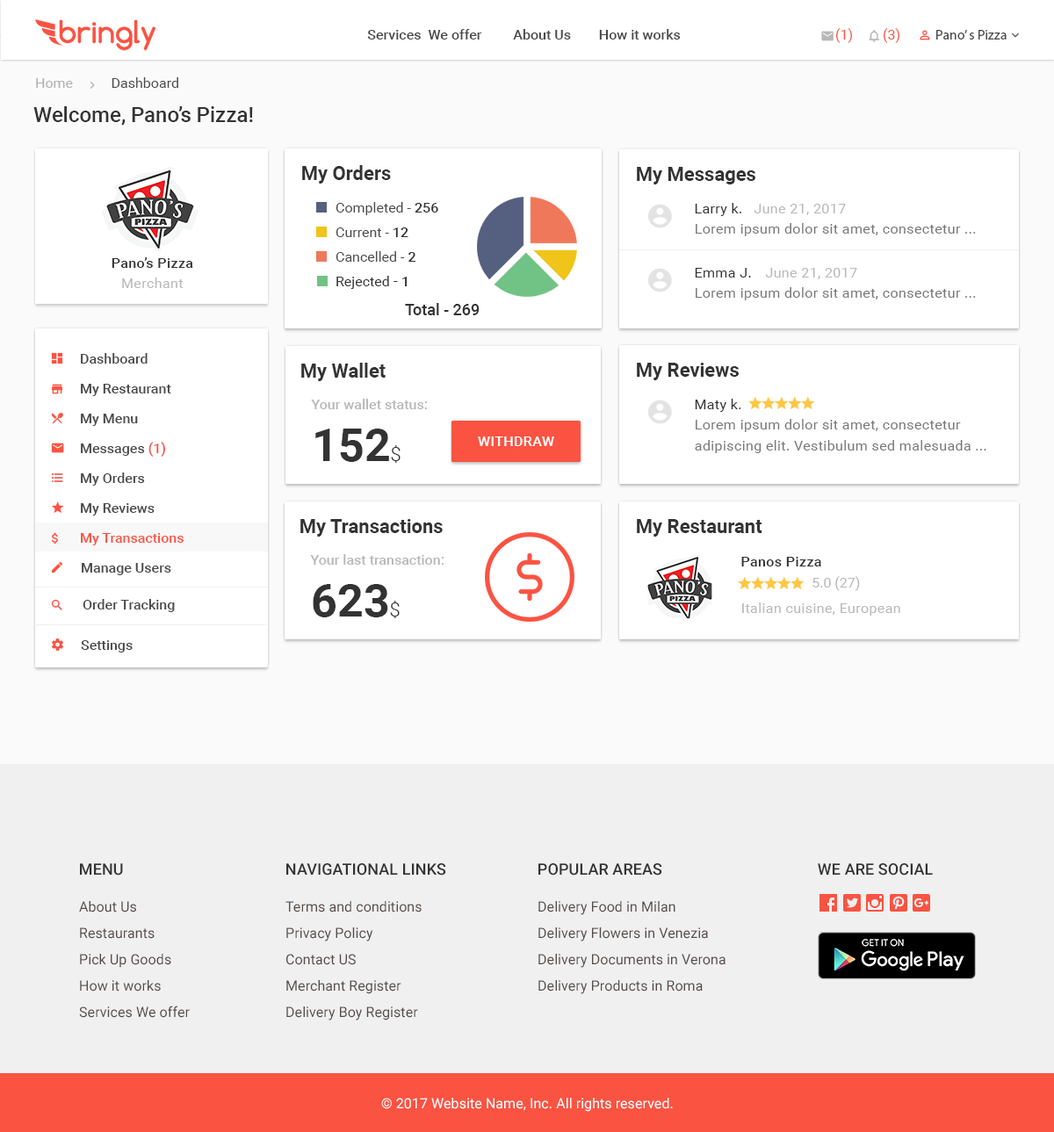
<style>
.page{position:relative;width:1054px;height:1132px;background:#ffffff}
.page>*{position:absolute;margin:0}
.t1{font:14px "Roboto-Medium";color:#4a4a4a}
.t2{font:14px "Roboto-Regular";color:#fa5342}
.t3{font:14px "MyriadPro-Regular";color:#4a4a4a}
.t4{font:14px "Roboto-Regular";color:#4a4a4a}
.t5{font:14px "Roboto-Regular";color:#b0b0b0}
.t6{font:21.1px "Roboto-Medium";color:#333333}
.t7{font:19.3px "Roboto-Bold";color:#333333}
.t8{font:14px/24.6px "Roboto-Regular";color:#4a4a4a}
.t9{font:14px/24.6px "Roboto-Medium";color:#333333}
.t10{font:14px/24.6px "Roboto-Regular";color:#333333}
.t11{font:14px "Roboto-Regular";letter-spacing:0.025em;color:#333333}
.t12{font:14px "Roboto-Regular";letter-spacing:0.025em;color:#b8b8b8}
.t13{font:14px "Roboto-Regular";letter-spacing:0.025em;color:#777777}
.t14{font:14px "Roboto-Medium";letter-spacing:0.025em;color:#333333}
.t15{font:15.8px "Roboto-Medium";color:#333333}
.t16{font:14px/29.9px "Roboto-Medium";color:#4a4a4a}
.t17{font:14px/29.9px "Roboto-Medium";color:#fa5342}
.t18{font:14px "Roboto-Medium";color:#b8b8b8}
.t19{font:14px/21.1px "Roboto-Regular";letter-spacing:0.025em;color:#777777}
.t20{font:45.7px "Roboto-Bold";color:#333333}
.t21{font:19.3px "Roboto-Light";color:#333333}
.t22{font:14px "Roboto-Medium";letter-spacing:0.025em;color:#fefefe;text-transform:uppercase}
.t23{font:14px "Roboto-Regular";color:#b8b8b8}
.t24{font:15.8px "Roboto-Medium";letter-spacing:0.005em;color:#333333}
.t25{font:15.8px "Roboto-Medium";letter-spacing:0.005em;color:#333333;text-transform:uppercase}
.t26{font:14px/26.3px "Roboto-Regular";letter-spacing:0.005em;color:#554c4a}
.t27{font:14px "Roboto-Regular";letter-spacing:0.005em;color:#ffffff}
</style>
<div class="page">
<p class="t1" style="left:367px;top:29px;width:313px;height:11px">Services  We offer         About Us        How it works</p>
<p class="t2" style="left:835px;top:28px;width:17px;height:15px">(1)</p>
<p class="t2" style="left:882px;top:28px;width:17px;height:15px">(3)</p>
<p class="t3" style="left:936px;top:30px;width:70px;height:10px">Pano’ s Pizza</p>
<p class="t4" style="left:36px;top:77px;width:142px;height:11px"><span class="t5">Home           </span>Dashboard</p>
<p class="t6" style="left:33px;top:106px;width:220px;height:20px">Welcome, Pano’s Pizza!</p>
<p class="t7" style="left:302px;top:165px;width:89px;height:19px">My Orders</p>
<p class="t7" style="left:637px;top:167px;width:118px;height:17px">My Messages</p>
<p class="t8" style="left:335px;top:202px;width:103px;height:87px">Completed - <span class="t9">256<br></span>Current - <span class="t9">12<br></span>Cancelled - <span class="t9">2<br></span><span class="t10">Rejected</span><span class="t9"> - 1</span></p>
<p class="t11" style="left:695px;top:203px;width:46px;height:13px">Larry k.</p>
<p class="t12" style="left:753px;top:204px;width:93px;height:11px">June 21, 2017</p>
<p class="t13" style="left:695px;top:223px;width:280px;height:13px">Lorem ipsum dolor sit amet, consectetur ...</p>
<p class="t14" style="left:112px;top:257px;width:81px;height:11px">Pano’s Pizza</p>
<p class="t11" style="left:695px;top:268px;width:56px;height:9px">Emma J.</p>
<p class="t12" style="left:765px;top:268px;width:92px;height:11px">June 21, 2017</p>
<p class="t12" style="left:122px;top:277px;width:61px;height:11px">Merchant</p>
<p class="t13" style="left:695px;top:287px;width:280px;height:13px">Lorem ipsum dolor sit amet, consectetur ...</p>
<p class="t15" style="left:405px;top:303px;width:74px;height:12px">Total - 269</p>
<p class="t16" style="left:81px;top:353px;width:103px;height:192px">Dashboard<br>My Restaurant<br>My Menu<br>Messages <span class="t17">(1)<br></span>My Orders<br>My Reviews<br><span class="t17">My Transactions</span></p>
<p class="t7" style="left:301px;top:363px;width:84px;height:18px">My Wallet</p>
<p class="t7" style="left:637px;top:363px;width:101px;height:17px">My Reviews</p>
<p class="t18" style="left:311px;top:399px;width:116px;height:10px">Your wallet status:</p>
<p class="t11" style="left:695px;top:399px;width:46px;height:13px">Maty k.</p>
<p class="t19" style="left:695px;top:419px;width:291px;height:34px">Lorem ipsum dolor sit amet, consectetur adipiscing elit. Vestibulum sed malesuada ...</p>
<p class="t20" style="left:315px;top:428px;width:85px;height:35px">152<span class="t21">$</span></p>
<p class="t22" style="left:478px;top:436px;width:76px;height:10px">Withdraw</p>
<p class="t7" style="left:300px;top:519px;width:143px;height:17px">My Transactions</p>
<p class="t7" style="left:637px;top:519px;width:125px;height:17px">My Restaurant</p>
<p class="t18" style="left:310px;top:554px;width:133px;height:11px">Your last transaction:</p>
<p class="t14" style="left:741px;top:557px;width:80px;height:9px">Panos Pizza</p>
<p class="t1" style="left:82px;top:563px;width:89px;height:12px">Manage Users</p>
<p class="t23" style="left:812px;top:576px;width:48px;height:15px">5.0 (27)</p>
<p class="t20" style="left:313px;top:584px;width:86px;height:34px">623<span class="t21">$</span></p>
<p class="t1" style="left:83px;top:599px;width:92px;height:13px">Order Tracking</p>
<p class="t12" style="left:742px;top:602px;width:158px;height:13px">Italian cuisine, European</p>
<p class="t1" style="left:81px;top:640px;width:52px;height:12px">Settings</p>
<p class="t24" style="left:80px;top:863px;width:43px;height:12px">MENU</p>
<p class="t25" style="left:286px;top:863px;width:160px;height:12px">Navigational Links</p>
<p class="t25" style="left:538px;top:863px;width:124px;height:12px">Popular Areas</p>
<p class="t25" style="left:817px;top:863px;width:115px;height:12px">We are social</p>
<p class="t26" style="left:79px;top:901px;width:111px;height:117px">About Us<br>Restaurants<br>Pick Up Goods <br>How it works <br>Services We offer</p>
<p class="t26" style="left:285px;top:901px;width:136px;height:119px">Terms and conditions<br>Privacy Policy<br>Contact US <br>Merchant Register <br>Delivery Boy Register</p>
<p class="t26" style="left:538px;top:901px;width:187px;height:93px">Delivery Food in Milan<br>Delivery Flowers in Venezia<br>Delivery Documents in Verona<br>Delivery Products in Roma</p>
<p class="t27" style="left:381px;top:1098px;width:292px;height:14px">© 2017 Website Name, Inc. All rights reserved.</p>
</div>
